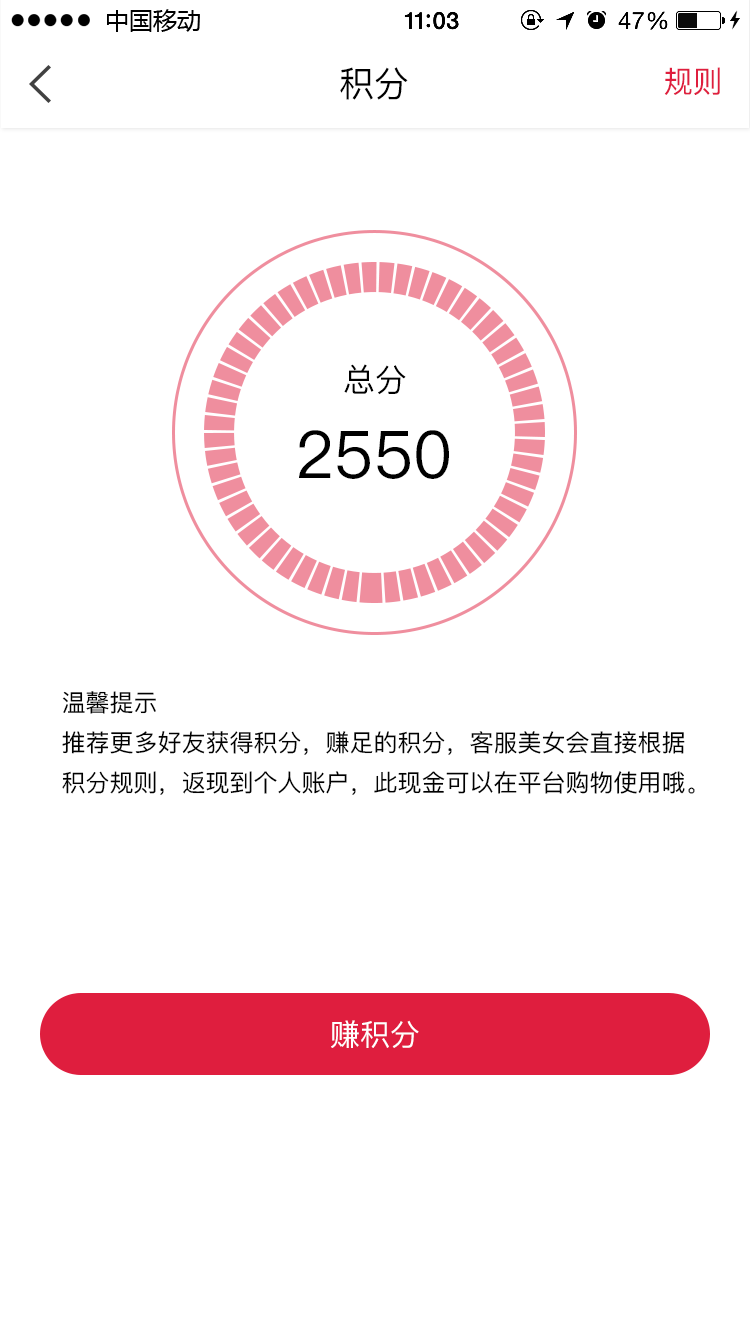
<style>
.page{position:relative;width:750px;height:1334px;background:#ffffff}
.page>*{position:absolute;margin:0}
.t1{font:35.5px "PingFang-SC-Medium";color:#000000}
.t2{font:30px "PingFang-SC-Medium";color:#df1e3e}
.t3{font:32px "PingFang-SC-Medium";color:#000000}
.t4{font:65.7px "PingFang-SC-Medium";color:#000000}
.t5{font:24px/40px "PingFang-SC-Medium";color:#000000}
.t6{font:30px "PingFang-SC-Medium";color:#ffffff}
</style>
<div class="page">
<p class="t1" style="left:340px;top:67px;width:68px;height:33px">积分</p>
<p class="t2" style="left:664px;top:67px;width:56px;height:28px">规则</p>
<p class="t3" style="left:344px;top:364px;width:62px;height:31px">总分</p>
<p class="t4" style="left:299px;top:430px;width:150px;height:49px">2550</p>
<p class="t5" style="left:62px;top:691px;width:633px;height:104px">温馨提示<br>推荐更多好友获得积分，赚足的积分，客服美女会直接根据<br>积分规则，返现到个人账户，此现金可以在平台购物使用哦。</p>
<p class="t6" style="left:331px;top:1020px;width:88px;height:28px">赚积分</p>
</div>
